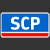
<style>
.page{position:relative;width:50px;height:50px;background:#333333}
.page>*{position:absolute;margin:0}
.t1{font:16.7px "Chevin-Bold";color:#ffffff;font-weight:bold}
</style>
<div class="page">
<p class="t1" style="left:11px;top:16px;width:29px;height:14px">SCP</p>
</div>
